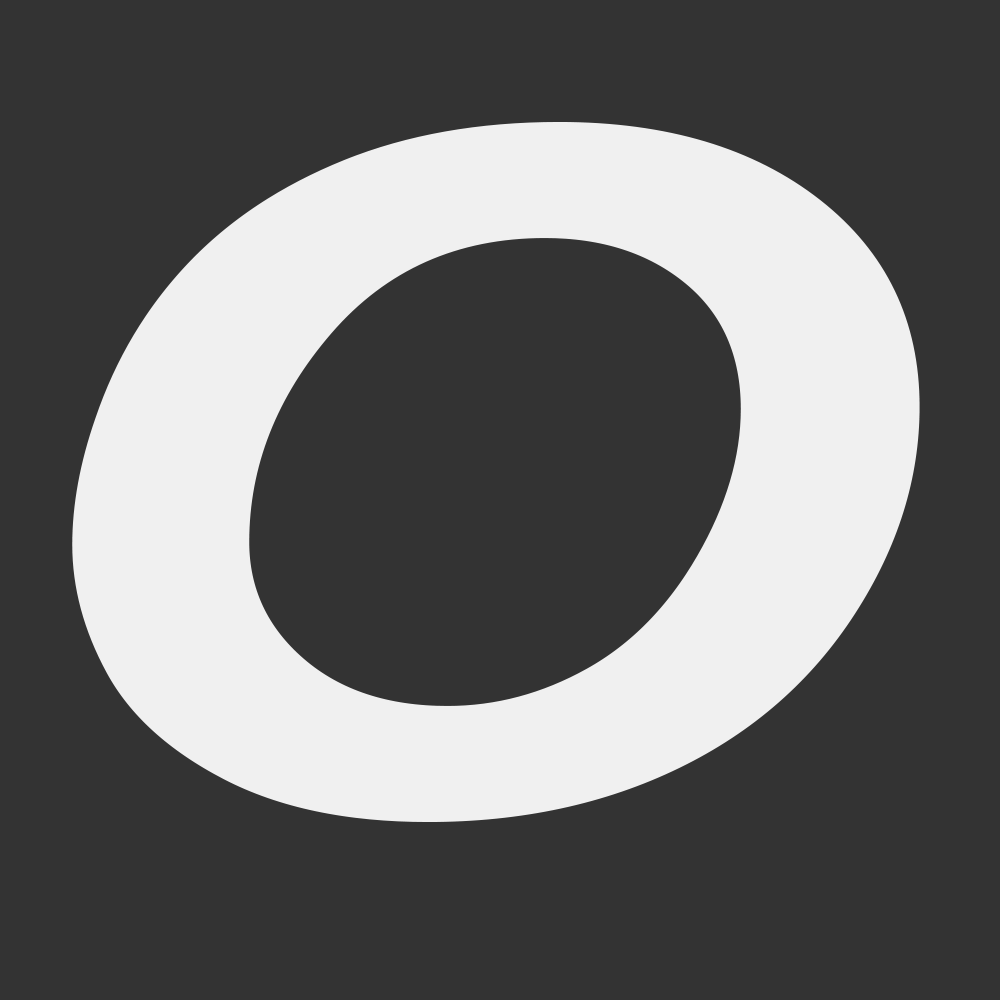
<style>
.page{position:relative;width:1000px;height:1000px;background:#333333}
.page>*{position:absolute;margin:0}
.t1{font:943.9px "Arial-BoldItalicMT";letter-spacing:0.1em;color:#f0f0f0;scale:1.29 1}
</style>
<div class="page">
<p class="t1" style="left:72px;top:122px;width:848px;height:700px">O</p>
</div>
